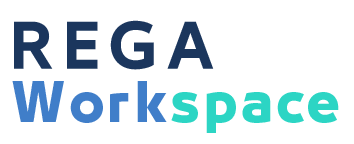
<style>
.page{position:relative;width:354px;height:144px;background:#ffffff}
.page>*{position:absolute;margin:0}
.t1{font:56.3px "29LTBukra-BoldItalic";letter-spacing:0.15em;color:#1b365d}
.t2{font:50px "29LTBukra-Bd";letter-spacing:0.07em;color:#2cd5c4}
.t3{font:50px "29LTBukra-Bd";letter-spacing:0.07em;color:#407ec9}
</style>
<div class="page">
<p class="t1" style="left:14px;top:20px;width:200px;height:50px">REGA</p>
<p class="t2" style="left:12px;top:81px;width:327px;height:52px"><span class="t3">Work</span>space</p>
</div>
